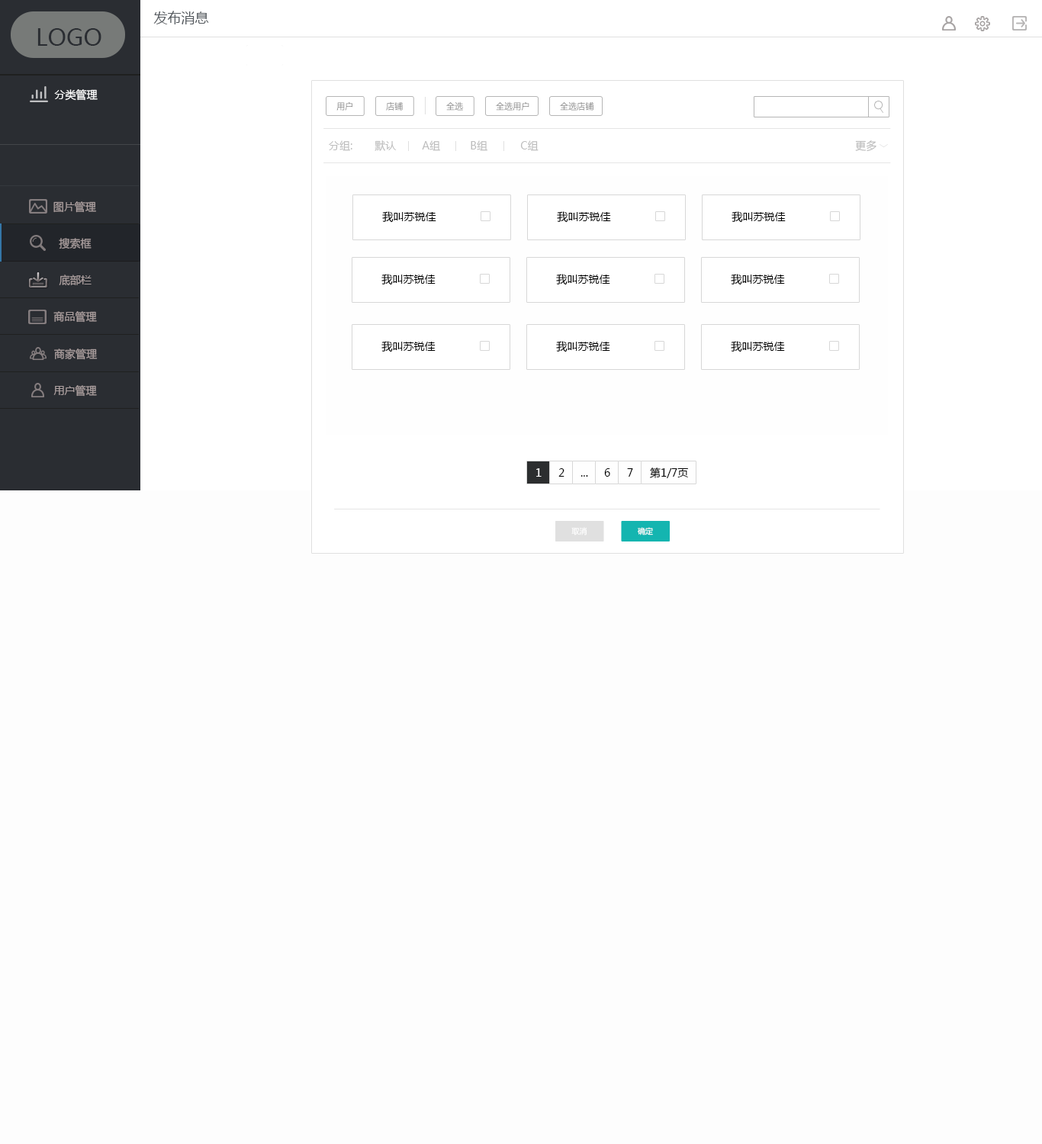
<style>
.page{position:relative;width:1042px;height:1144px;background:#fdfdfd}
.page>*{position:absolute;margin:0}
.t1{font:13.7px "MicrosoftYaHei";color:#555a5f}
.t2{font:22.9px "MicrosoftYaHei";color:#2a2d32}
.t3{font:10.7px "MicrosoftYaHei";color:#ffffff}
.t4{font:8.5px "MicrosoftYaHei";color:#808080}
.t5{font:8.5px "MicrosoftYaHei"}
.t6{font:10.7px "MicrosoftYaHei";color:#bdbdbd}
.t7{font:10.7px "MicrosoftYaHei";color:#ab9f9f}
.t8{font:10.7px "MicrosoftYaHei";color:#000000}
.t9{font:7.6px "MicrosoftYaHei";color:#ffffff}
</style>
<div class="page">
<p class="t1" style="left:153px;top:11px;width:56px;height:13px">发布消息</p>
<p class="t2" style="left:37px;top:28px;width:64px;height:18px">LOGO</p>
<p class="t3" style="left:54px;top:89px;width:44px;height:12px">分类管理</p>
<p class="t4" style="left:336px;top:101px;width:16px;height:10px">用户</p>
<p class="t4" style="left:386px;top:101px;width:17px;height:10px">店铺</p>
<p class="t5" style="left:446px;top:101px;width:17px;height:10px">全选</p>
<p class="t4" style="left:496px;top:101px;width:33px;height:10px">全选用户</p>
<p class="t4" style="left:560px;top:101px;width:34px;height:10px">全选店铺</p>
<p class="t6" style="left:329px;top:140px;width:23px;height:11px">分组:</p>
<p class="t6" style="left:375px;top:140px;width:22px;height:11px">默认</p>
<p class="t6" style="left:422px;top:140px;width:18px;height:11px">A组</p>
<p class="t6" style="left:471px;top:140px;width:16px;height:11px">B组</p>
<p class="t6" style="left:520px;top:140px;width:19px;height:11px">C组</p>
<p class="t6" style="left:855px;top:140px;width:22px;height:12px">更多</p>
<p class="t7" style="left:53px;top:201px;width:43px;height:12px">图片管理</p>
<p class="t8" style="left:382px;top:211px;width:54px;height:12px">我叫苏锐佳</p>
<p class="t8" style="left:557px;top:211px;width:54px;height:12px">我叫苏锐佳</p>
<p class="t8" style="left:732px;top:211px;width:54px;height:12px">我叫苏锐佳</p>
<p class="t7" style="left:59px;top:238px;width:33px;height:11px">搜索框</p>
<p class="t7" style="left:59px;top:275px;width:33px;height:10px">底部栏</p>
<p class="t8" style="left:381px;top:274px;width:55px;height:11px">我叫苏锐佳</p>
<p class="t8" style="left:556px;top:274px;width:54px;height:11px">我叫苏锐佳</p>
<p class="t8" style="left:731px;top:274px;width:54px;height:11px">我叫苏锐佳</p>
<p class="t7" style="left:53px;top:311px;width:44px;height:12px">商品管理</p>
<p class="t8" style="left:381px;top:341px;width:55px;height:11px">我叫苏锐佳</p>
<p class="t8" style="left:556px;top:341px;width:54px;height:11px">我叫苏锐佳</p>
<p class="t8" style="left:731px;top:341px;width:54px;height:11px">我叫苏锐佳</p>
<p class="t7" style="left:54px;top:349px;width:44px;height:11px">商家管理</p>
<p class="t7" style="left:53px;top:385px;width:44px;height:12px">用户管理</p>
<p class="t3" style="left:536px;top:468px;width:6px;height:9px">1</p>
<p class="t8" style="left:558px;top:468px;width:7px;height:9px">2</p>
<p class="t8" style="left:604px;top:468px;width:6px;height:9px">6</p>
<p class="t8" style="left:627px;top:468px;width:6px;height:9px">7</p>
<p class="t8" style="left:650px;top:468px;width:38px;height:10px">第1/7页</p>
<p class="t8" style="left:581px;top:475px;width:7px;height:2px">...</p>
<p class="t9" style="left:571px;top:527px;width:16px;height:9px">取消</p>
<p class="t9" style="left:638px;top:527px;width:15px;height:9px">确定</p>
</div>
